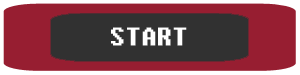
<style>
.page{position:relative;width:300px;height:75px;background:#971e31}
.page>*{position:absolute;margin:0}
.t1{font:24.9px "Fixedsys";color:#ffffff;font-weight:bold}
</style>
<div class="page">
<p class="t1" style="left:111px;top:27px;width:76px;height:19px">START</p>
</div>
